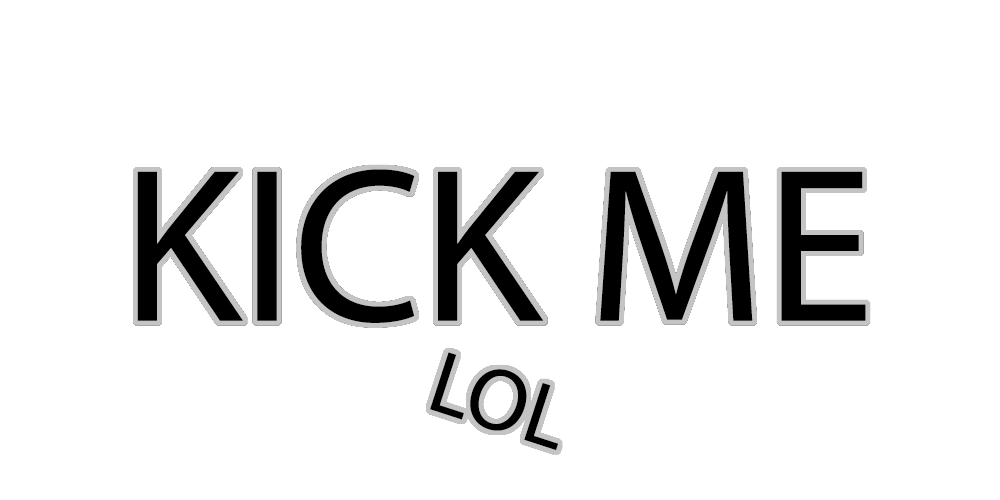
<style>
.page{position:relative;width:1000px;height:500px;background:#ffffff}
.page>*{position:absolute;margin:0}
.t1{font:220.6px "MyriadPro-Regular";color:#000000}
.t2{font:88.2px "MyriadPro-Regular";color:#000000}
</style>
<div class="page">
<p class="t1" style="left:137px;top:169px;width:729px;height:154px">KICK ME</p>
<p class="t2" style="left:430px;top:352px;width:128px;height:98px;rotate:18deg">LOL</p>
</div>
